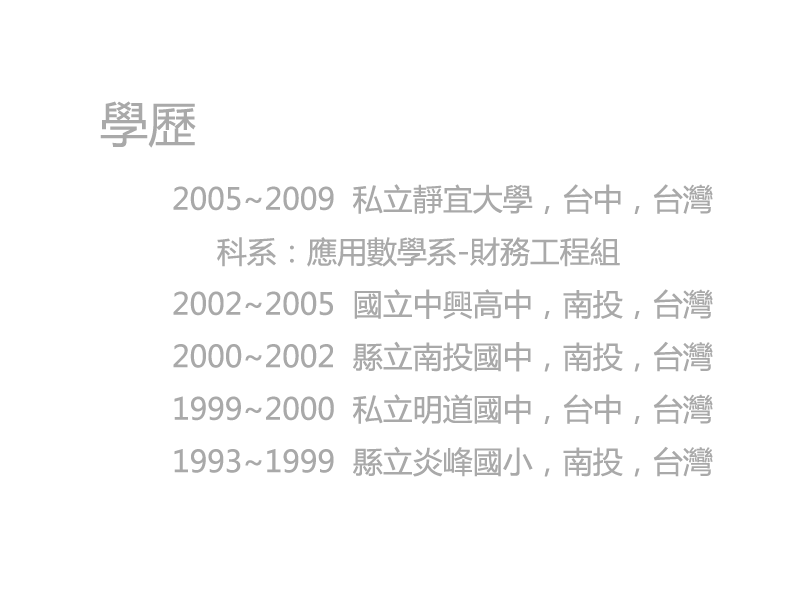
<style>
.page{position:relative;width:800px;height:600px;background:#ffffff}
.page>*{position:absolute;margin:0}
.t1{font:30px "MicrosoftYaHei";color:#a9a9a9}
.t2{font:48px "MicrosoftYaHei";color:#a9a9a9}
</style>
<div class="page">
<p class="t1" style="left:100px;top:101px;width:613px;height:376px"><span class="t2">學歷<br></span>  2005~2009  私立靜宜大學，台中，台灣<br>    科系：應用數學系-財務工程組<br>  2002~2005  國立中興高中，南投，台灣<br>  2000~2002  縣立南投國中，南投，台灣<br>  1999~2000  私立明道國中，台中，台灣<br>  1993~1999  縣立炎峰國小，南投，台灣</p>
</div>
